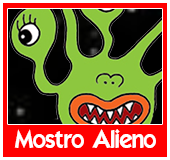
<style>
.page{position:relative;width:170px;height:160px;background:#ff0000}
.page>*{position:absolute;margin:0}
.t1{font:24px "ELEGANCE";color:#ffffff}
</style>
<div class="page">
<p class="t1" style="left:14px;top:129px;width:142px;height:19px">Mostro Alieno</p>
</div>
